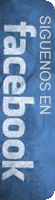
<style>
.page{position:relative;width:55px;height:200px}
.page>*{position:absolute;margin:0}
.t1{font:14.6px "ArialMT";letter-spacing:-0.01em;color:#c5cedb}
</style>
<div class="page">
<p class="t1" style="left:39px;top:16px;width:12px;height:98px;rotate:90deg">SIGUENOS EN</p>
</div>
